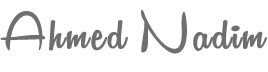
<style>
.page{position:relative;width:268px;height:72px;background:#ffffff}
.page>*{position:absolute;margin:0}
.t1{font:60px "RemachineScriptPersonalUse";letter-spacing:0.04em;color:#6f6f6f}
</style>
<div class="page">
<p class="t1" style="left:0px;top:9px;width:267px;height:45px">Ahmed Nadim</p>
</div>
